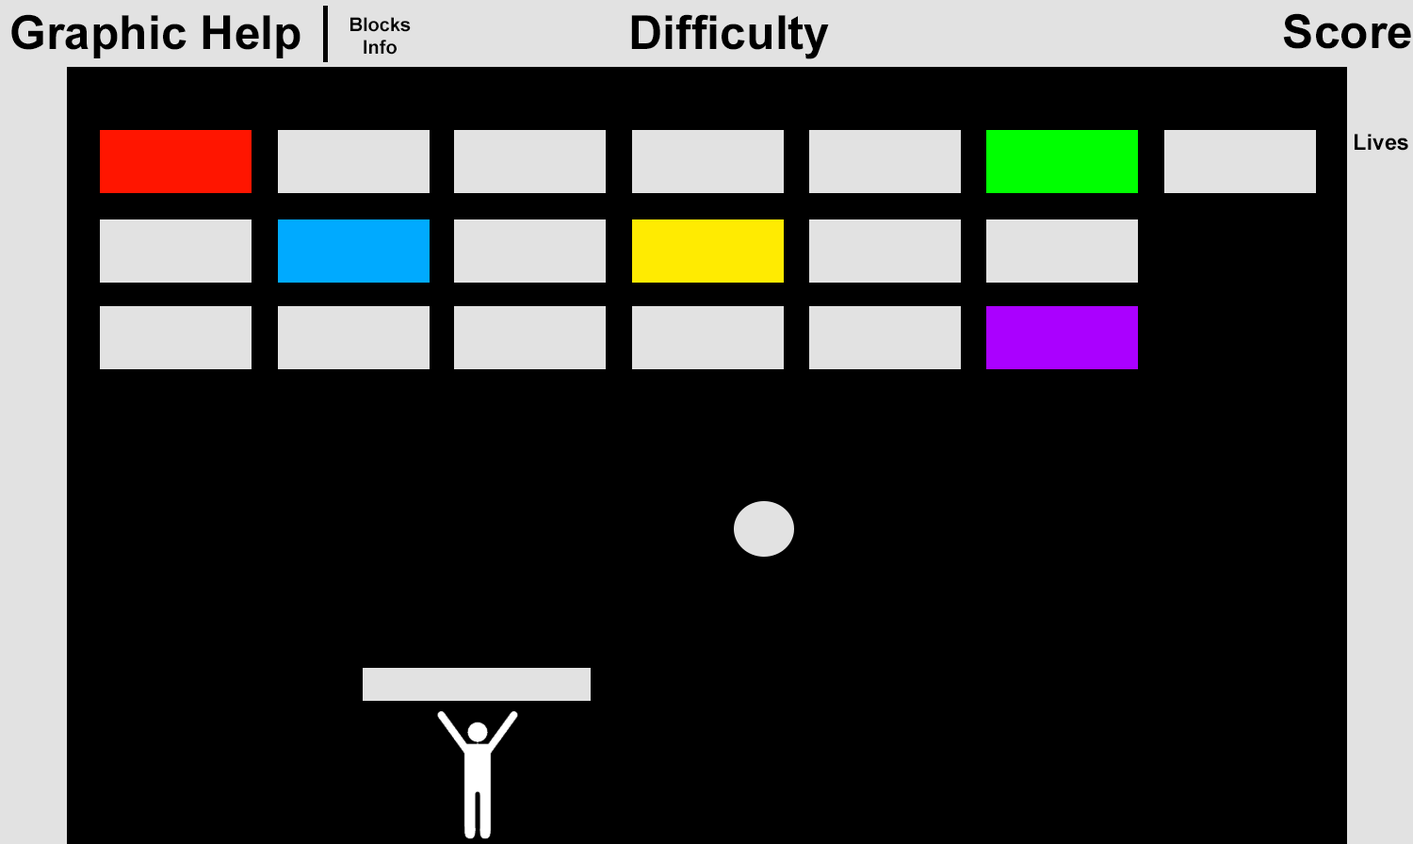
<style>
.page{position:relative;width:1413px;height:844px;background:#000000}
.page>*{position:absolute;margin:0}
.t1{font:47.1px "Arial-BoldMT";color:#000000}
.t2{font:18.8px "Arial-BoldMT";color:#000000}
.t3{font:22px "Arial-BoldMT";color:#000000}
</style>
<div class="page">
<p class="t1" style="left:11px;top:14px;width:289px;height:44px">Graphic Help</p>
<p class="t2" style="left:350px;top:17px;width:61px;height:38px;text-align:center">Blocks<br>Info</p>
<p class="t1" style="left:631px;top:14px;width:198px;height:45px">Difficulty</p>
<p class="t1" style="left:1283px;top:13px;width:128px;height:36px">Score</p>
<p class="t3" style="left:1354px;top:134px;width:54px;height:17px">Lives</p>
</div>
